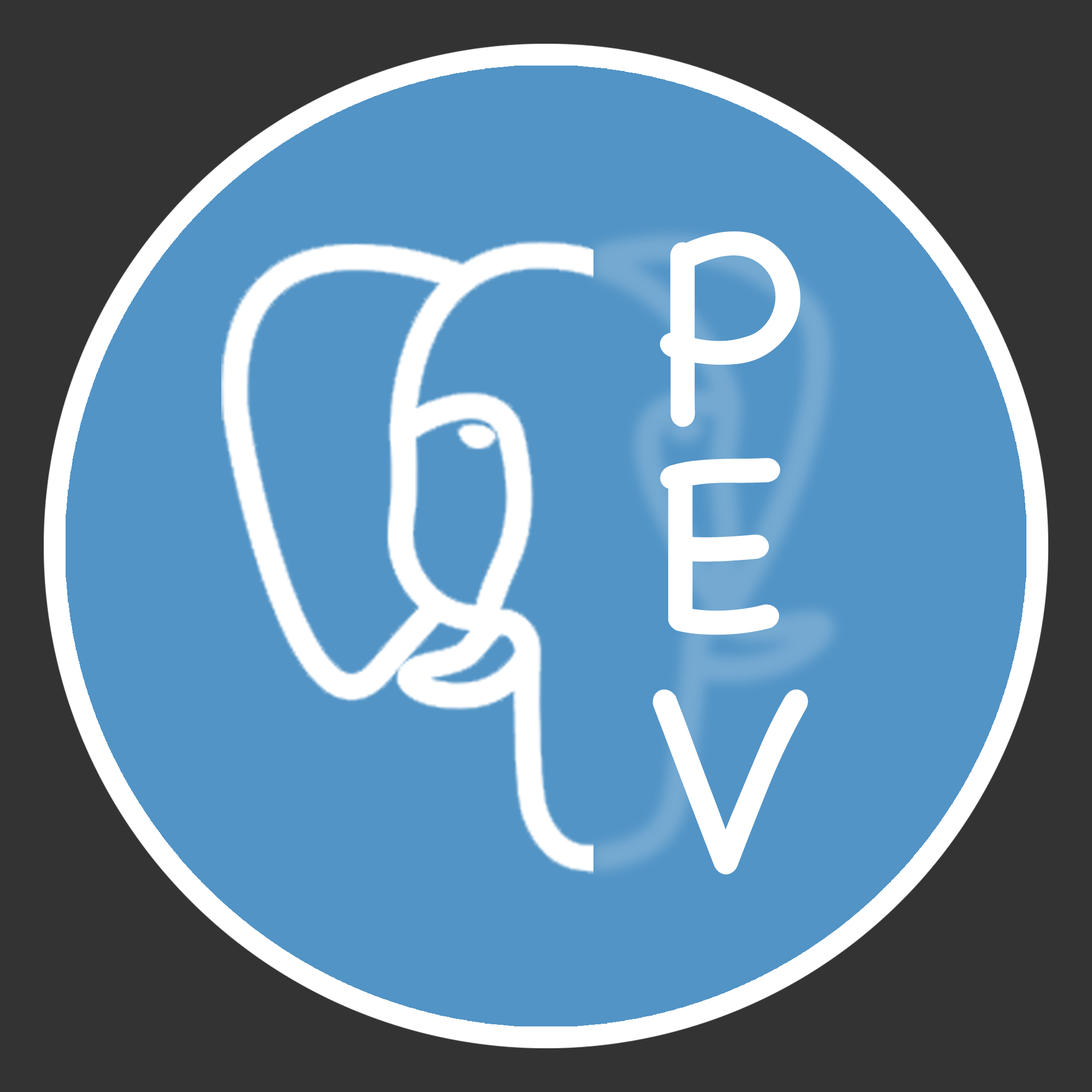
<style>
.page{position:relative;width:1092px;height:1092px;background:#5294c6}
.page>*{position:absolute;margin:0}
.t1{font:266.6px "Chalkboard";letter-spacing:0.1em;color:#ffffff}
</style>
<div class="page">
<p class="t1" style="left:660px;top:231px;width:140px;height:196px">P</p>
<p class="t1" style="left:660px;top:458px;width:120px;height:177px">E</p>
<p class="t1" style="left:653px;top:689px;width:155px;height:185px">V</p>
</div>
